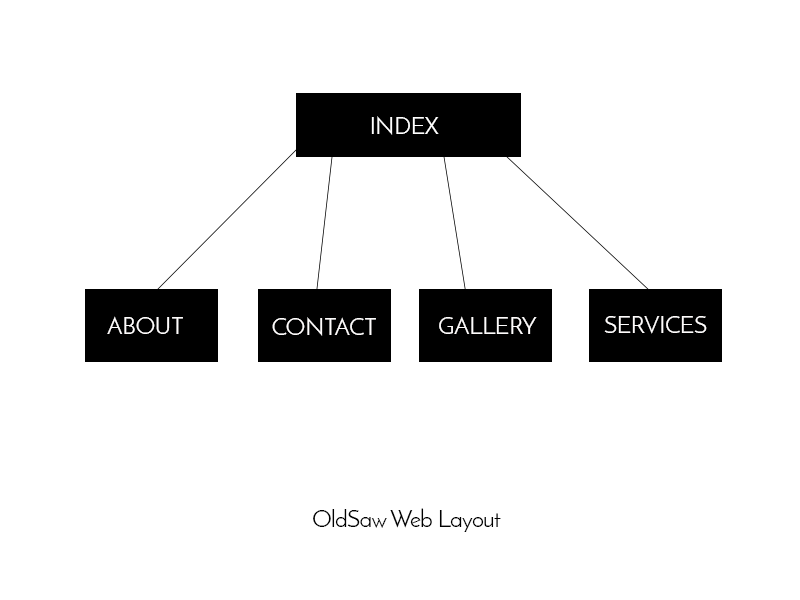
<style>
.page{position:relative;width:800px;height:600px;background:#ffffff}
.page>*{position:absolute;margin:0}
.t1{font:24px "JosefinSans";letter-spacing:-0.025em;color:#ffffff}
.t2{font:24px "JosefinSans";letter-spacing:-0.025em;color:#fefcfc}
.t3{font:24px "JosefinSans";letter-spacing:-0.025em;color:#000000}
</style>
<div class="page">
<p class="t1" style="left:371px;top:116px;width:68px;height:19px">INDEX</p>
<p class="t2" style="left:107px;top:316px;width:76px;height:18px">ABOUT</p>
<p class="t2" style="left:272px;top:317px;width:104px;height:19px">CONTACT</p>
<p class="t2" style="left:439px;top:316px;width:98px;height:18px">GALLERY</p>
<p class="t2" style="left:604px;top:316px;width:103px;height:18px">SERVICES</p>
<p class="t3" style="left:313px;top:508px;width:188px;height:24px">OldSaw Web Layout</p>
</div>
